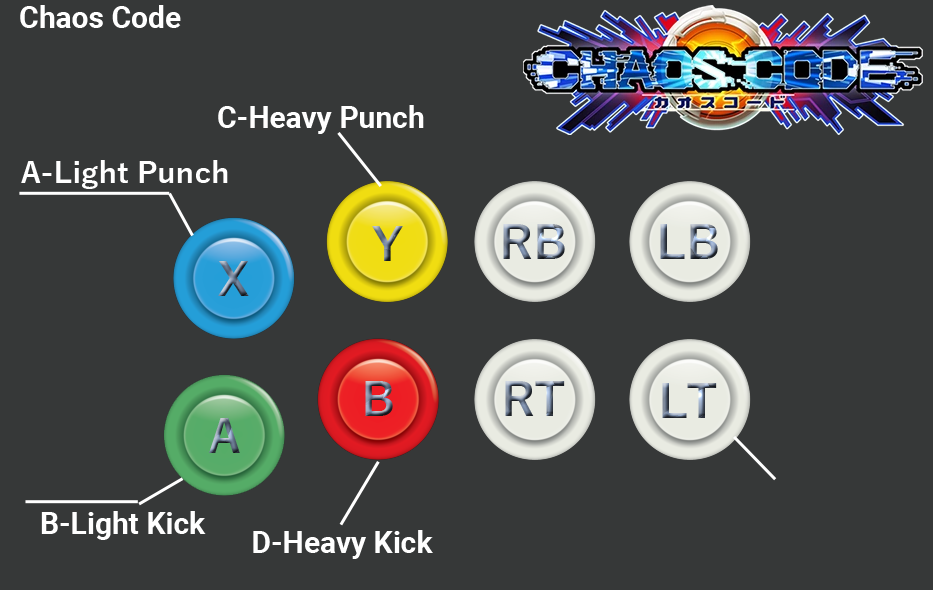
<style>
.page{position:relative;width:933px;height:590px;background:#363838}
.page>*{position:absolute;margin:0}
.t1{font:30px "Roboto-Bold";color:#ffffff}
.t2{font:30px "YuGothic-Bold";color:#ffffff}
</style>
<div class="page">
<p class="t1" style="left:20px;top:5px;width:161px;height:23px">Chaos Code</p>
<p class="t1" style="left:218px;top:105px;width:206px;height:29px">C-Heavy Punch</p>
<p class="t2" style="left:21px;top:160px;width:207px;height:29px">A-Light Punch</p>
<p class="t1" style="left:41px;top:511px;width:165px;height:29px">B-Light Kick</p>
<p class="t1" style="left:253px;top:530px;width:180px;height:29px">D-Heavy Kick</p>
</div>
